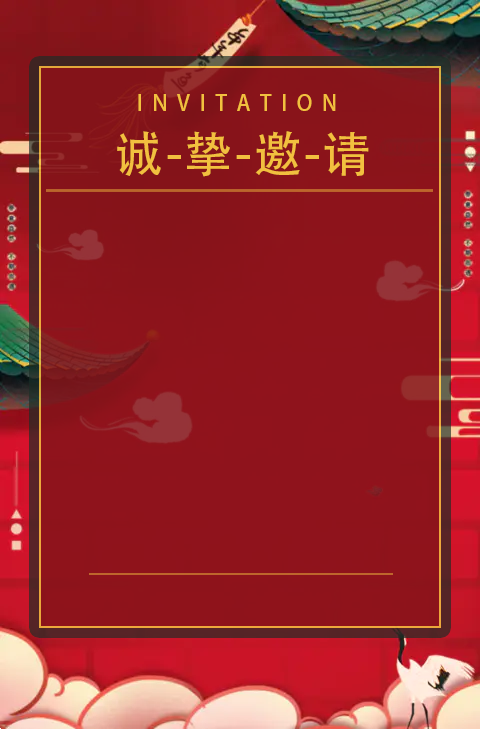
<style>
.page{position:relative;width:480px;height:729px}
.page>*{position:absolute;margin:0}
.t1{font:21.3px "AdobeHeitiStd-Regular";letter-spacing:0.45em;color:#f2c03f}
.t2{font:48px "AdobeHeitiStd-Regular";letter-spacing:0.05em;color:#f2c03f}
</style>
<div class="page">
<p class="t1" style="left:138px;top:94px;width:198px;height:17px">INVITATION</p>
<p class="t2" style="left:117px;top:131px;width:252px;height:46px">诚-挚-邀-请</p>
</div>
